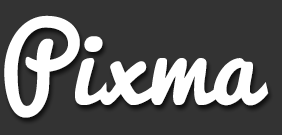
<style>
.page{position:relative;width:282px;height:135px;background:#333333}
.page>*{position:absolute;margin:0}
.t1{font:100px "Pacifico-Regular";color:#ffffff}
</style>
<div class="page">
<p class="t1" style="left:4px;top:15px;width:265px;height:103px">Pixma</p>
</div>
